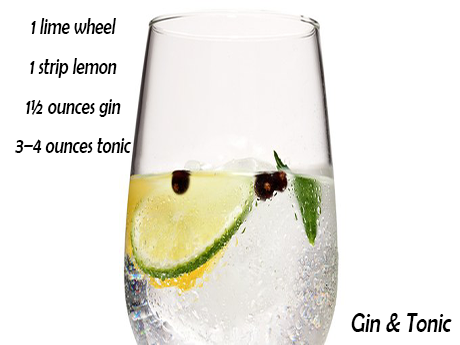
<style>
.page{position:relative;width:460px;height:345px;background:#ffffff}
.page>*{position:absolute;margin:0}
.t1{font:22.8px "BerlinSansFB-Reg";color:#000000;font-style:italic;scale:0.75 1}
.t2{font:28.1px "BerlinSansFB-Reg";color:#000000;font-style:italic;scale:0.75 1}
</style>
<div class="page">
<p class="t1" style="left:15px;top:18px;width:117px;height:135px;text-align:center">1 lime wheel<br>    1 strip lemon<br>    1½ ounces gin <br>    3–4 ounces tonic water</p>
<p class="t2" style="left:351px;top:313px;width:101px;height:19px">Gin &amp; Tonic</p>
</div>
